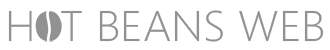
<style>
.page{position:relative;width:330px;height:50px;background:#ffffff}
.page>*{position:absolute;margin:0}
.t1{font:10.3px "SegoeUI-Light";color:#939292;scale:1.06 1}
</style>
<div class="page">
<p class="t1" style="left:8px;top:10px;width:316px;height:32px">H  T BEANS WEB</p>
</div>
